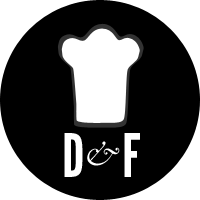
<style>
.page{position:relative;width:200px;height:200px;background:#000000}
.page>*{position:absolute;margin:0}
.t1{font:60px "LeagueGothic";color:#ffffff}
.t2{font:36px "Garamond-Italic";color:#ffffff}
</style>
<div class="page">
<p class="t1" style="left:64px;top:133px;width:19px;height:44px">D</p>
<p class="t1" style="left:124px;top:133px;width:16px;height:44px">F</p>
<p class="t2" style="left:87px;top:141px;width:33px;height:25px">&amp;</p>
</div>
